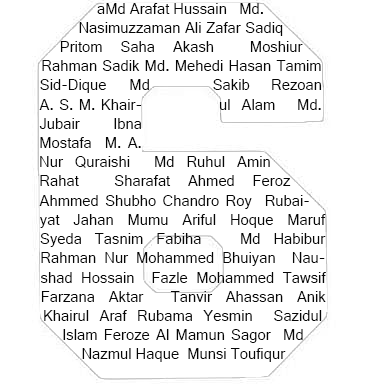
<style>
.page{position:relative;width:384px;height:384px;background:#ffffff}
.page>*{position:absolute;margin:0}
.t1{font:16px "Gautami";color:#060606}
</style>
<div class="page">
<p class="t1" style="left:39px;top:3px;width:287px;height:359px;text-align:justify">aMd Arafat Hussain   Md. Nasimuzzaman Ali Zafar Sadiq Pritom Saha Akash  Moshiur Rahman Sadik Md. Mehedi Hasan Tamim Sid-Dique   Md Sakib Rezoan  A. S. M. Khairul Alam  Md. Jubair Ibna Mostafa  M. A. Nur Quraishi  Md Ruhul Amin Rahat  Sharafat Ahmed Feroz Ahmmed Shubho Chandro Roy  Rubaiyat Jahan Mumu Ariful Hoque Maruf  Syeda Tasnim Fabiha   Md Habibur Rahman Nur Mohammed Bhuiyan  Naushad Hossain  Fazle Mohammed Tawsif  Farzana Aktar  Tanvir Ahassan Anik  Khairul Araf Rubama Yesmin  Sazidul Islam Feroze Al Mamun Sagor  Md Nazmul Haque  Munsi Toufiqur Rahman Md. Nazmul Haque  Tanvir Ahmed Siddiki Mohammad Julfikar Rahman</p>
</div>
